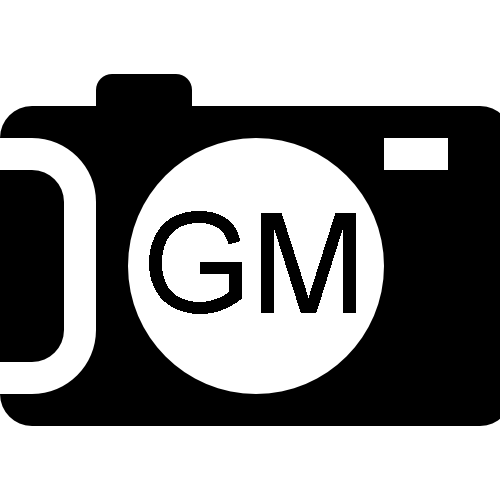
<style>
.page{position:relative;width:500px;height:500px;background:#ffffff}
.page>*{position:absolute;margin:0}
.t1{font:138.9px "ArialMT";color:#000000}
</style>
<div class="page">
<p class="t1" style="left:149px;top:211px;width:207px;height:103px">GM</p>
</div>
